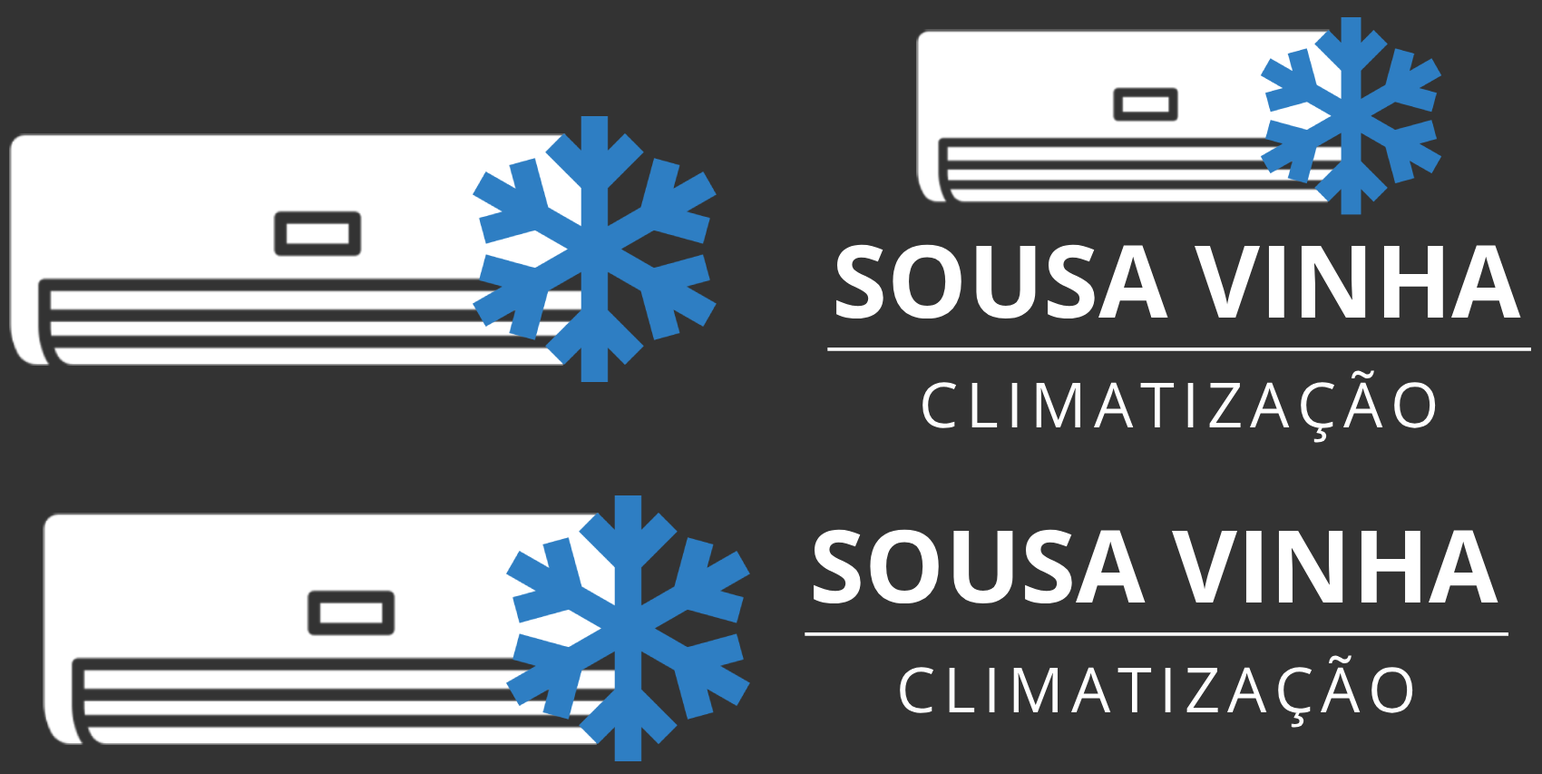
<style>
.page{position:relative;width:1542px;height:774px;background:#333333}
.page>*{position:absolute;margin:0}
.t1{font:100.5px "OpenSansRoman-Bold";color:#ffffff}
.t2{font:62.2px "OpenSansRoman-Regular";letter-spacing:0.12em;color:#ffffff}
</style>
<div class="page">
<p class="t1" style="left:836px;top:244px;width:685px;height:75px">SOUSA VINHA</p>
<p class="t2" style="left:922px;top:370px;width:513px;height:73px">CLIMATIZAÇÃO</p>
<p class="t1" style="left:813px;top:529px;width:685px;height:75px">SOUSA VINHA</p>
<p class="t2" style="left:900px;top:655px;width:513px;height:72px">CLIMATIZAÇÃO</p>
</div>
